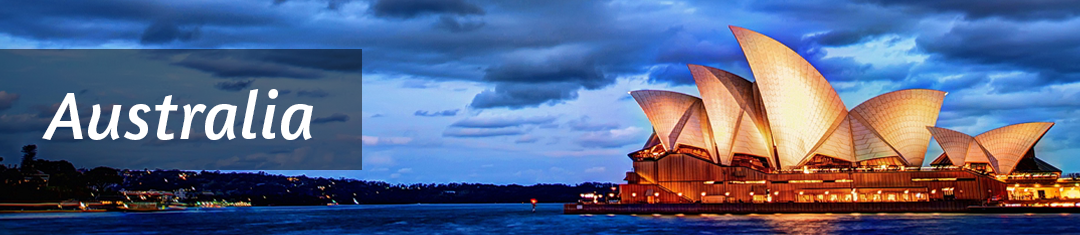
<style>
.page{position:relative;width:1080px;height:235px}
.page>*{position:absolute;margin:0}
.t1{font:69.4px "Amaranth-Italic";letter-spacing:0.01em;color:#ffffff}
</style>
<div class="page">
<p class="t1" style="left:42px;top:89px;width:271px;height:51px">Australia</p>
</div>
